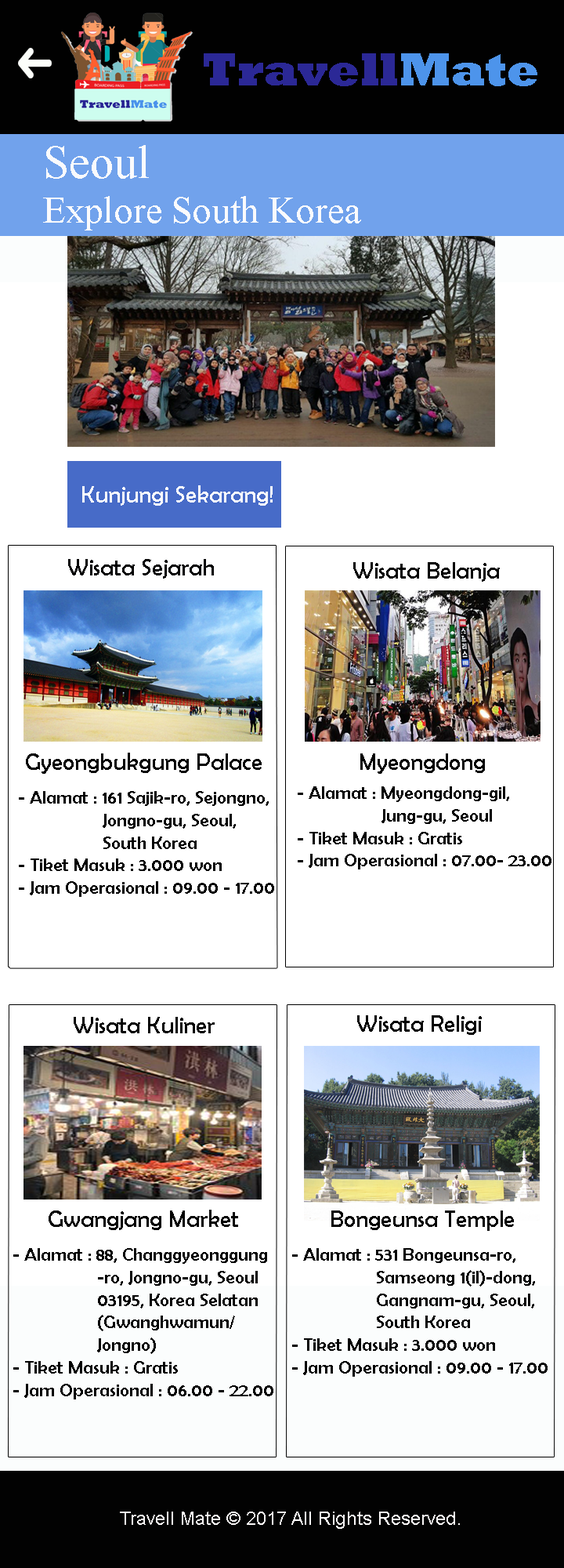
<style>
.page{position:relative;width:564px;height:1568px;background:#ffffff}
.page>*{position:absolute;margin:0}
.t1{font:47px "Rockwell-ExtraBold";color:#2b2896}
.t2{font:47px "Rockwell-ExtraBold";color:#4d94eb}
.t3{font:37.6px "TimesNewRomanPSMT";color:#fafafc}
.t4{font:47px "TimesNewRomanPSMT";color:#fafafc}
.t5{font:23.5px "BerlinSansFB-Reg";color:#fafafc}
.t6{font:23.5px "BerlinSansFB-Reg";color:#000001}
.t7{font:23.5px "BerlinSansFB-Reg";color:#020202}
.t8{font:18.8px "BerlinSansFB-Reg";color:#020202}
.t9{font:18.8px "ArialMT";color:#fcf9f9}
</style>
<div class="page">
<p class="t1" style="left:204px;top:53px;width:334px;height:33px">Travell<span class="t2">Mate</span></p>
<p class="t3" style="left:43px;top:145px;width:318px;height:85px"><span class="t4">Seoul<br></span>Explore South Korea</p>
<p class="t5" style="left:82px;top:485px;width:191px;height:21px">Kunjungi Sekarang!</p>
<p class="t6" style="left:68px;top:559px;width:146px;height:20px">Wisata Sejarah</p>
<p class="t7" style="left:354px;top:562px;width:146px;height:20px">Wisata Belanja</p>
<p class="t7" style="left:26px;top:753px;width:236px;height:21px">Gyeongbukgung Palace</p>
<p class="t7" style="left:361px;top:753px;width:124px;height:21px">Myeongdong</p>
<p class="t8" style="left:19px;top:791px;width:255px;height:106px">- Alamat : 161 Sajik-ro, Sejongno, <br>   Jongno-gu, Seoul, <br>   South Korea<br>- Tiket Masuk : 3.000 won<br>- Jam Operasional : 09.00 - 17.00</p>
<p class="t8" style="left:298px;top:786px;width:254px;height:83px">- Alamat : Myeongdong-gil, <br>   Jung-gu, Seoul<br>- Tiket Masuk : Gratis<br>- Jam Operasional : 07.00- 23.00</p>
<p class="t7" style="left:74px;top:1017px;width:141px;height:16px">Wisata Kuliner</p>
<p class="t7" style="left:358px;top:1015px;width:124px;height:20px">Wisata Religi</p>
<p class="t7" style="left:49px;top:1210px;width:189px;height:20px">Gwangjang Market</p>
<p class="t7" style="left:332px;top:1210px;width:182px;height:21px">Bongeunsa Temple</p>
<p class="t8" style="left:13px;top:1248px;width:261px;height:151px">- Alamat : 88, Changgyeonggung<br>   -ro, Jongno-gu, Seoul <br>   03195, Korea Selatan <br>   (Gwanghwamun/<br>   Jongno)<br>- Tiket Masuk : Gratis<br>- Jam Operasional : 06.00 - 22.00</p>
<p class="t8" style="left:292px;top:1248px;width:256px;height:129px">- Alamat : 531 Bongeunsa-ro, <br>   Samseong 1(il)-dong, <br>   Gangnam-gu, Seoul, <br>   South Korea<br>- Tiket Masuk : 3.000 won<br>- Jam Operasional : 09.00 - 17.00</p>
<p class="t9" style="left:120px;top:1512px;width:340px;height:17px">Travell Mate © 2017 All Rights Reserved.</p>
</div>
